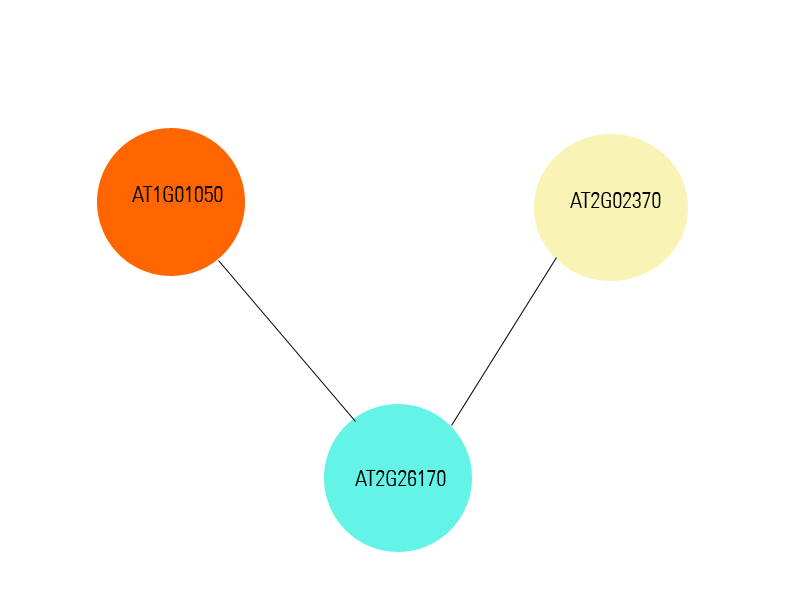
<style>
.page{position:relative;width:800px;height:600px;background:#ffffff}
.page>*{position:absolute;margin:0}
.t1{font:22px "UniversCondLight";color:#000100}
</style>
<div class="page">
<p class="t1" style="left:132px;top:186px;width:91px;height:16px">AT1G01050</p>
<p class="t1" style="left:570px;top:192px;width:91px;height:16px">AT2G02370</p>
<p class="t1" style="left:355px;top:470px;width:91px;height:16px">AT2G26170</p>
</div>
